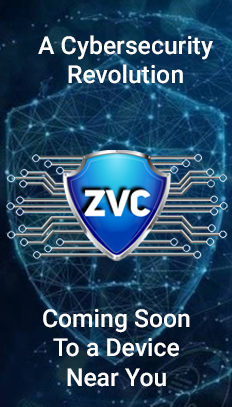
<style>
.page{position:relative;width:232px;height:407px}
.page>*{position:absolute;margin:0}
.t1{font:24.8px "Roboto-Medium";color:#ffffff}
</style>
<div class="page">
<p class="t1" style="left:38px;top:35px;width:175px;height:49px;text-align:center">A Cybersecurity<br>Revolution</p>
<p class="t1" style="left:43px;top:309px;width:147px;height:78px;text-align:center">Coming Soon<br>To a Device<br>Near You</p>
</div>
